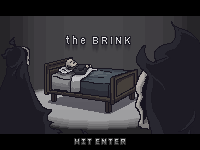
<style>
.page{position:relative;width:200px;height:150px;background:#000000}
.page>*{position:absolute;margin:0}
.t1{font:11px "FranklinGothic-Medium";letter-spacing:0.18em;color:#bfbec3}
</style>
<div class="page">
<p class="t1" style="left:66px;top:36px;width:19px;height:8px">the</p>
<p class="t1" style="left:93px;top:37px;width:37px;height:7px">BRINK</p>
</div>
